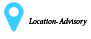
<style>
.page{position:relative;width:91px;height:39px;background:#ffffff}
.page>*{position:absolute;margin:0}
.t1{font:8px "MinionPro-It";color:#000000}
</style>
<div class="page">
<p class="t1" style="left:29px;top:18px;width:58px;height:8px">Location-Advisory</p>
</div>
